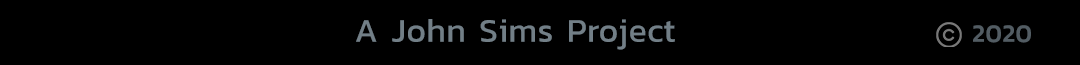
<style>
.page{position:relative;width:1080px;height:65px;background:#000000}
.page>*{position:absolute;margin:0}
.t1{font:33.3px "Kanit-Regular";letter-spacing:0.02em;color:#a2b4c0}
.t2{font:25px "Kanit-Medium";letter-spacing:0.02em;color:#75838c}
</style>
<div class="page">
<p class="t1" style="left:356px;top:19px;width:675px;height:31px;opacity:0.59">A John Sims Project                       <span class="t2">2020</span></p>
</div>
